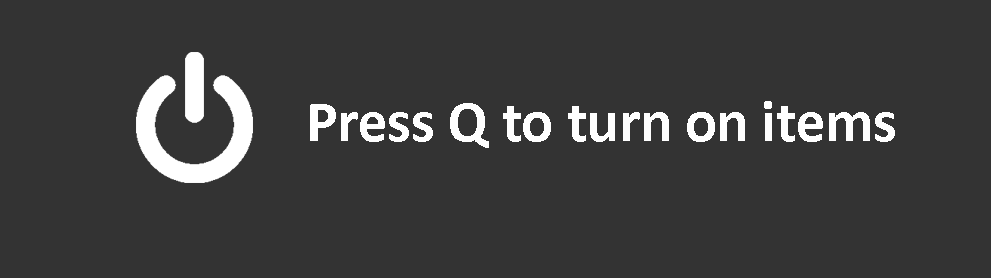
<style>
.page{position:relative;width:991px;height:278px;background:#333333}
.page>*{position:absolute;margin:0}
.t1{font:59px "Calibri-Bold";color:#ffffff}
</style>
<div class="page">
<p class="t1" style="left:310px;top:101px;width:585px;height:47px">Press Q to turn on items</p>
</div>
